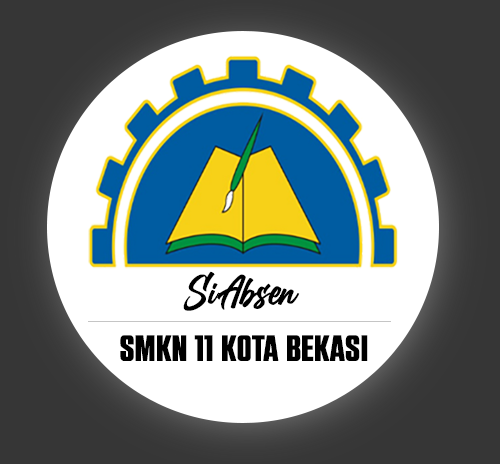
<style>
.page{position:relative;width:500px;height:464px;background:#ffffff}
.page>*{position:absolute;margin:0}
.t1{font:42.3px "BillionDreams";color:#000000}
.t2{font:36.7px "RockstarExtraBold";color:#000000;scale:0.76 1}
</style>
<div class="page">
<p class="t1" style="left:183px;top:271px;width:117px;height:40px">SiAbsen</p>
<p class="t2" style="left:120px;top:335px;width:248px;height:26px">SMKN 11 Kota Bekasi</p>
</div>
